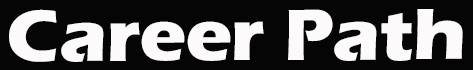
<style>
.page{position:relative;width:473px;height:70px;background:#050505}
.page>*{position:absolute;margin:0}
.t1{font:75px "ErasITC-Bold";letter-spacing:-0.01em;color:#fcfafa;scale:1.05 1}
</style>
<div class="page">
<p class="t1" style="left:9px;top:9px;width:454px;height:53px">Career Path</p>
</div>
